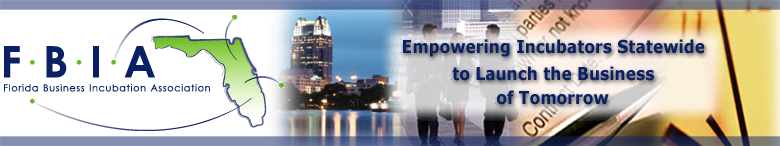
<style>
.page{position:relative;width:780px;height:146px;background:#ffffff}
.page>*{position:absolute;margin:0}
.t1{font:17.9px "Verdana-Bold";color:#0a2064;scale:0.87 1}
.t2{font:1.3px "Verdana-Bold";color:#0a2064;scale:0.87 1}
</style>
<div class="page">
<p class="t1" style="left:400px;top:39px;width:305px;height:18px"><span class="t2">e</span>Empowering Incubators Statewide</p>
<p class="t1" style="left:451px;top:66px;width:203px;height:15px"><span class="t2">e</span>to Launch the Business</p>
<p class="t1" style="left:495px;top:90px;width:114px;height:15px"><span class="t2">e</span>of Tomorrow</p>
</div>
